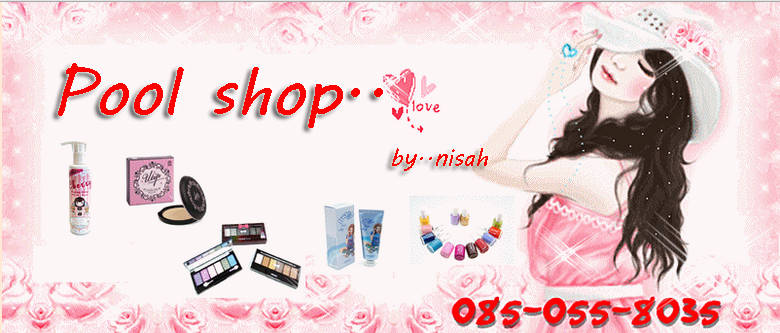
<style>
.page{position:relative;width:780px;height:333px;background:#fcf6f7}
.page>*{position:absolute;margin:0}
.t1{font:64px "MVBoli";color:#fc0002}
.t2{font:24px "MVBoli";color:#fc0002}
</style>
<div class="page">
<p class="t1" style="left:58px;top:63px;width:325px;height:65px">Pool shop..</p>
<p class="t2" style="left:392px;top:148px;width:96px;height:23px">by..nisah</p>
</div>
